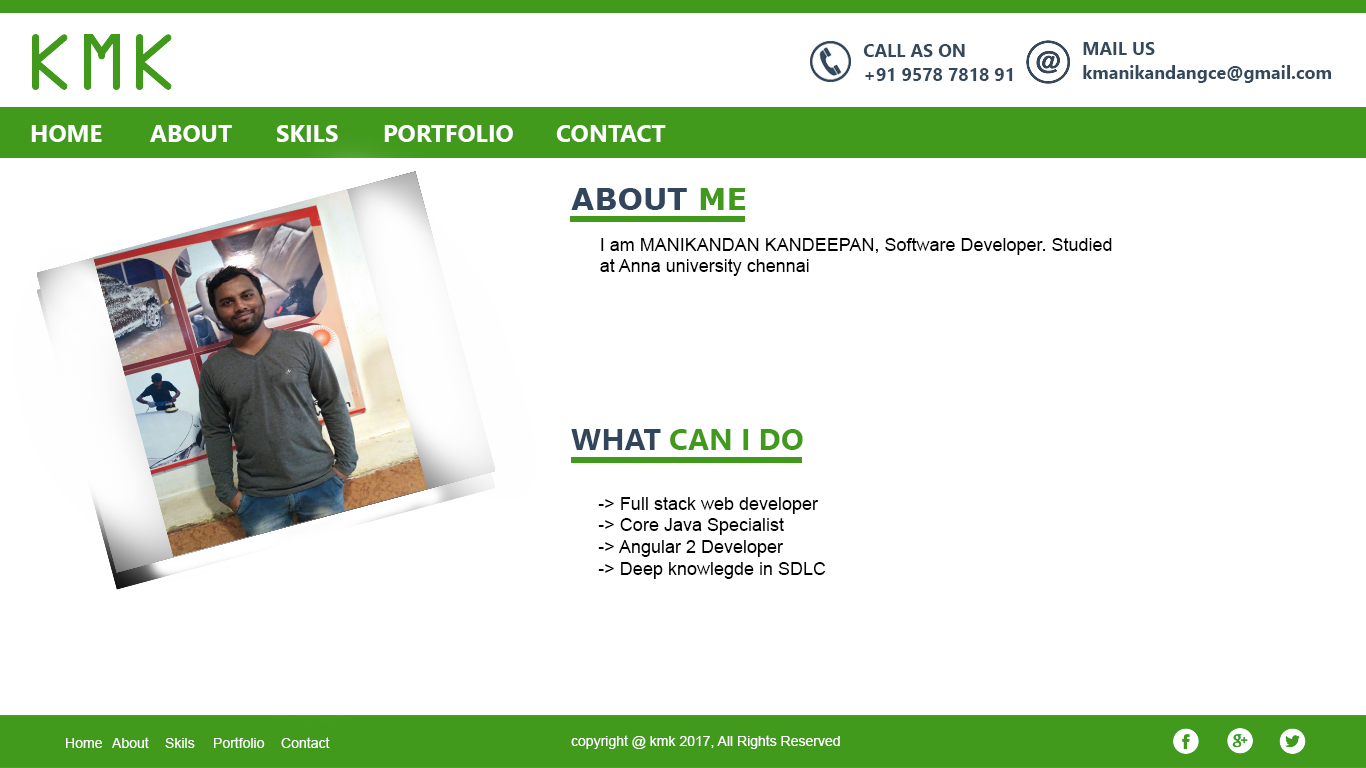
<style>
.page{position:relative;width:1366px;height:768px;background:#ffffff}
.page>*{position:absolute;margin:0}
.t1{font:18px/24px "NirmalaUI-Bold";color:#34495e}
.t2{font:24px "NirmalaUI-Bold";color:#ffffff}
.t3{font:30px "Verdana-Bold";color:#31465c}
.t4{font:30px "Verdana-Bold";color:#419a1c}
.t5{font:18px "ArialMT";color:#000000}
.t6{font:30px "NirmalaUI-Bold";color:#419a1c}
.t7{font:30px "NirmalaUI-Bold";color:#31465c}
.t8{font:14px "ArialMT";color:#fbfbfb}
.t9{font:14px "ArialMT";color:#ffffff}
</style>
<div class="page">
<p class="t1" style="left:863px;top:44px;width:150px;height:37px">CALL AS ON<br>+91 9578 7818 91</p>
<p class="t1" style="left:1083px;top:42px;width:248px;height:41px">MAIL US<br>kmanikandangce@gmail.com</p>
<p class="t2" style="left:31px;top:125px;width:71px;height:17px">HOME</p>
<p class="t2" style="left:150px;top:125px;width:82px;height:17px">ABOUT</p>
<p class="t2" style="left:277px;top:125px;width:61px;height:17px">SKILS</p>
<p class="t2" style="left:384px;top:125px;width:129px;height:17px">PORTFOLIO</p>
<p class="t2" style="left:556px;top:125px;width:110px;height:17px">CONTACT</p>
<p class="t3" style="left:571px;top:188px;width:175px;height:22px">ABOUT <span class="t4">ME</span></p>
<p class="t5" style="left:600px;top:238px;width:512px;height:38px">I am MANIKANDAN KANDEEPAN, Software Developer. Studied<br>at Anna university chennai</p>
<p class="t6" style="left:571px;top:429px;width:232px;height:21px"><span class="t7">WHAT </span>CAN I DO</p>
<p class="t5" style="left:598px;top:497px;width:228px;height:82px">-&gt; Full stack web developer<br>-&gt; Core Java Specialist<br>-&gt; Angular 2 Developer<br>-&gt; Deep knowlegde in SDLC</p>
<p class="t8" style="left:112px;top:737px;width:37px;height:11px">About</p>
<p class="t8" style="left:214px;top:737px;width:51px;height:11px">Portfolio</p>
<p class="t8" style="left:281px;top:737px;width:49px;height:11px">Contact</p>
<p class="t9" style="left:571px;top:735px;width:269px;height:14px">copyright @ kmk 2017, All Rights Reserved</p>
<p class="t8" style="left:66px;top:738px;width:36px;height:10px">Home</p>
<p class="t8" style="left:165px;top:738px;width:30px;height:10px">Skils</p>
</div>
